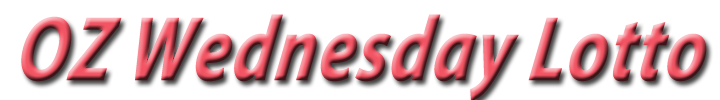
<style>
.page{position:relative;width:720px;height:100px;background:#ffffff}
.page>*{position:absolute;margin:0}
.t1{font:92px "MyriadPro-BoldIt";font-weight:bold;font-style:italic;scale:0.79 1}
</style>
<div class="page">
<p class="t1" style="left:21px;top:14px;width:686px;height:87px">OZ Wednesday Lotto</p>
</div>
